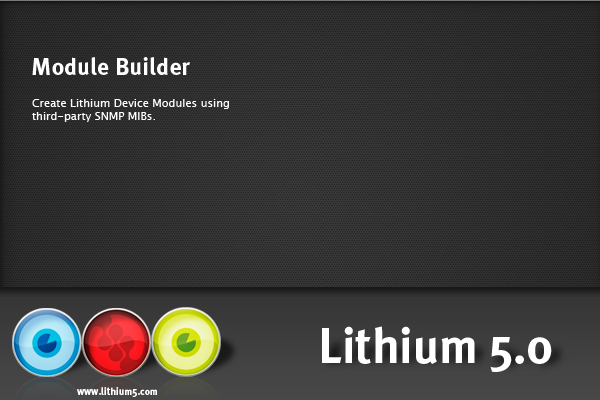
<style>
.page{position:relative;width:600px;height:400px}
.page>*{position:absolute;margin:0}
.t1{font:24px "MetaPlusBold-Roman";color:#ffffff}
.t2{font:11px "LucidaGrande";color:#ffffff}
.t3{font:49.3px "MetaPlusBold-Roman";color:#ffffff}
.t4{font:10.2px "MetaPlusBold-Roman";color:#ffffff}
</style>
<div class="page">
<p class="t1" style="left:32px;top:57px;width:158px;height:18px">Module Builder</p>
<p class="t2" style="left:32px;top:99px;width:197px;height:23px">Create Lithium Device Modules using<br>third-party SNMP MIBs.</p>
<p class="t3" style="left:322px;top:326px;width:230px;height:46px">Lithium 5.0</p>
<p class="t4" style="left:77px;top:387px;width:80px;height:10px">www.lithium5.com</p>
</div>
